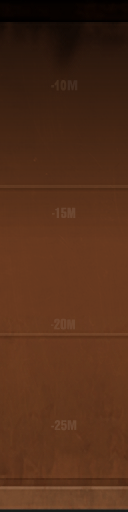
<style>
.page{position:relative;width:128px;height:512px}
.page>*{position:absolute;margin:0}
.t1{font:13px "Helvetica-Condensed-Bold";color:#442c20;scale:1.12 1}
.t2{font:13.8px "Helvetica-UltraCompressed";color:#6d4731;scale:1.33 1}
.t3{font:13px "Helvetica-UltraCompressed";color:#6d4731;scale:1.33 1}
.t4{font:14.3px "Helvetica-UltraCompressed";color:#724830;scale:1.35 1}
.t5{font:13.4px "Helvetica-UltraCompressed";color:#724830;scale:1.35 1}
.t6{font:13.4px "Helvetica-UltraCompressed";color:#714830;scale:1.35 1}
.t7{font:12.9px "Helvetica-Condensed-Bold";color:#6f4932}
.t8{font:11px "Helvetica-Condensed-Bold";color:#6f4932}
</style>
<div class="page">
<p class="t1" style="left:67px;top:80px;width:11px;height:11px">M</p>
<p class="t2" style="left:52px;top:207px;width:24px;height:11px"><span class="t3">-</span>15M</p>
<p class="t4" style="left:51px;top:318px;width:16px;height:12px"><span class="t5">-</span>20</p>
<p class="t6" style="left:67px;top:319px;width:8px;height:11px">M</p>
<p class="t7" style="left:51px;top:420px;width:26px;height:11px"><span class="t8">-</span>25M</p>
</div>
